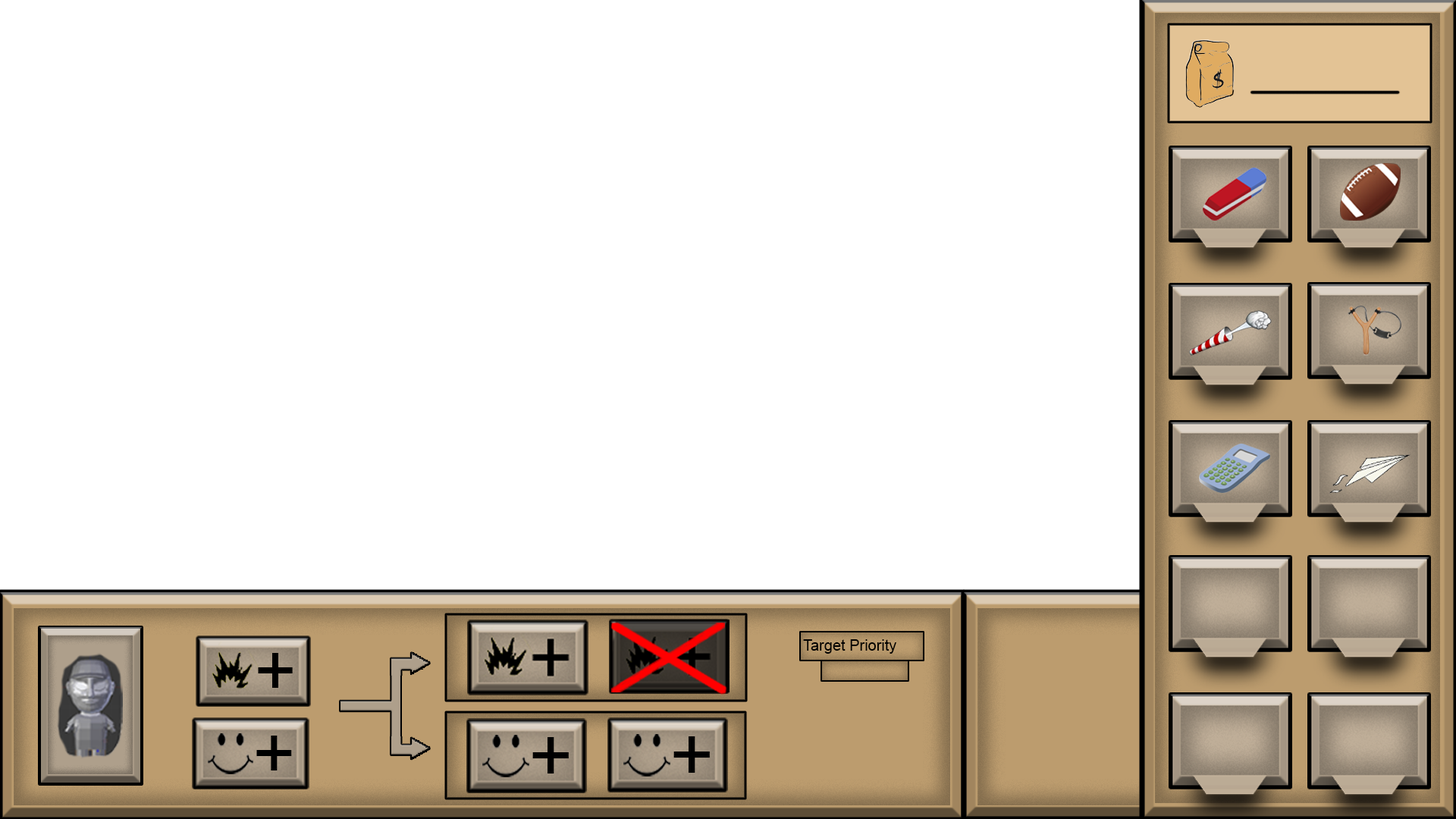
<style>
.page{position:relative;width:1456px;height:819px;background:#ffffff}
.page>*{position:absolute;margin:0}
.t1{font:15.2px "ArialMT";color:#000000}
.t2{font:72.9px "ArialMT";color:#000000}
.t3{font:73.6px "ArialMT";color:#000000}
.t4{font:76.1px "ArialMT";color:#000000}
</style>
<div class="page">
<p class="t1" style="left:803px;top:639px;width:93px;height:15px">Target Priority</p>
<p class="t2" style="left:258px;top:653px;width:35px;height:35px">+</p>
<p class="t3" style="left:256px;top:736px;width:36px;height:34px">+</p>
<p class="t4" style="left:532px;top:737px;width:37px;height:36px">+</p>
<p class="t4" style="left:673px;top:736px;width:37px;height:37px">+</p>
</div>
